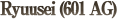
<style>
.page{position:relative;width:118px;height:19px;background:#ffffff}
.page>*{position:absolute;margin:0}
.t1{font:18px "RyuminPro-ExBold";letter-spacing:-0.08em;color:#4a3f32;font-weight:bold;scale:0.9 1}
</style>
<div class="page">
<p class="t1" style="left:0px;top:0px;width:117px;height:19px">Ryuusei (601 AG)</p>
</div>
